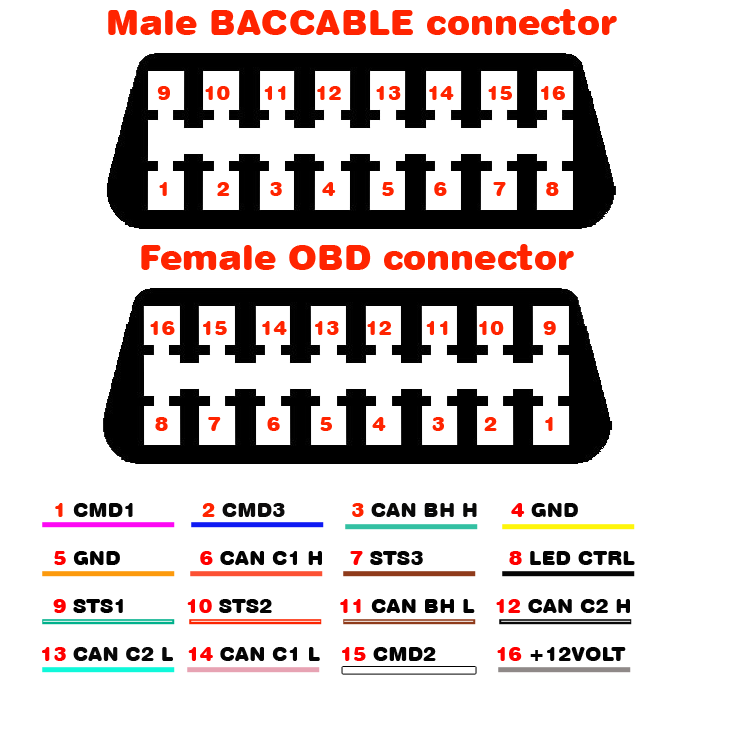
<style>
.page{position:relative;width:746px;height:750px;background:#ffffff}
.page>*{position:absolute;margin:0}
.t1{font:35px "Swiss721BT-BlackRounded";color:#ff2400}
.t2{font:20px "Swiss721BT-BlackRounded";color:#0a0a09}
.t3{font:20px "Swiss721BT-BlackRounded";color:#ff2400}
.t4{font:20px "Swiss721BT-BlackRounded";color:#060606}
.t5{font:20px "Swiss721BT-BlackRounded";color:#0d0c0c}
.t6{font:20px "Swiss721BT-BlackRounded";color:#ff0000}
.t7{font:20px "Swiss721BT-BlackRounded";color:#050505}
.t8{font:20px "Swiss721BT-BlackRounded";color:#000000}
.t9{font:20px "Swiss721BT-BlackRounded";color:#030303}
.t10{font:20px "Swiss721BT-BlackRounded";color:#040404}
.t11{font:20px "Swiss721BT-BlackRounded";color:#010101}
.t12{font:20px "Swiss721BT-BlackRounded";color:#080808}
.t13{font:20px "Swiss721BT-BlackRounded";color:#020202}
</style>
<div class="page">
<p class="t1" style="left:108px;top:9px;width:509px;height:26px">Male BACCABLE connector</p>
<p class="t1" style="left:141px;top:244px;width:433px;height:26px">Female OBD connector</p>
<p class="t2" style="left:42px;top:503px;width:593px;height:158px"><span class="t3">  1 </span><span class="t4">CMD1</span><span class="t3">          2 </span><span class="t5">CMD3 </span><span class="t3">         3 </span>CAN BH H     <span class="t6">4 </span><span class="t7">GND<br></span><span class="t6"><br>  5 </span><span class="t8">GND</span><span class="t6">            6 </span><span class="t9">CAN C1 H</span><span class="t6">    7 </span><span class="t7">STS3</span><span class="t6">             8 </span><span class="t10">LED CTRL<br></span><span class="t6"><br>  9 </span><span class="t8">STS1</span><span class="t6">         10 </span><span class="t10">STS2</span><span class="t6">          11 </span><span class="t11">CAN BH L</span><span class="t6">   12 </span><span class="t9">CAN C2 H<br></span><span class="t6"><br>13 </span><span class="t12">CAN C2 L</span><span class="t6">  14 </span><span class="t7">CAN C1 L</span><span class="t6">   15 </span><span class="t9">CMD2</span><span class="t6">         16 </span><span class="t13">+12VOLT</span></p>
</div>
